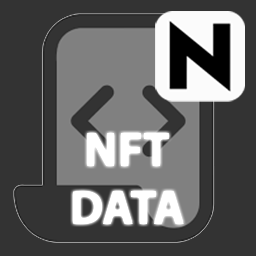
<style>
.page{position:relative;width:256px;height:256px;background:#333333}
.page>*{position:absolute;margin:0}
.t1{font:48px "MyriadPro-Bold";color:#ffffff}
</style>
<div class="page">
<p class="t1" style="left:73px;top:133px;width:111px;height:91px;text-align:center">NFT<br>DATA</p>
</div>
